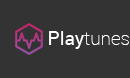
<style>
.page{position:relative;width:130px;height:78px;background:#333333}
.page>*{position:absolute;margin:0}
.t1{font:19px "Roboto-Thin";color:#ffffff}
.t2{font:19px "Roboto-Regular";color:#ffffff}
</style>
<div class="page">
<p class="t1" style="left:49px;top:31px;width:80px;height:18px"><span class="t2">Play</span>tunes</p>
</div>
